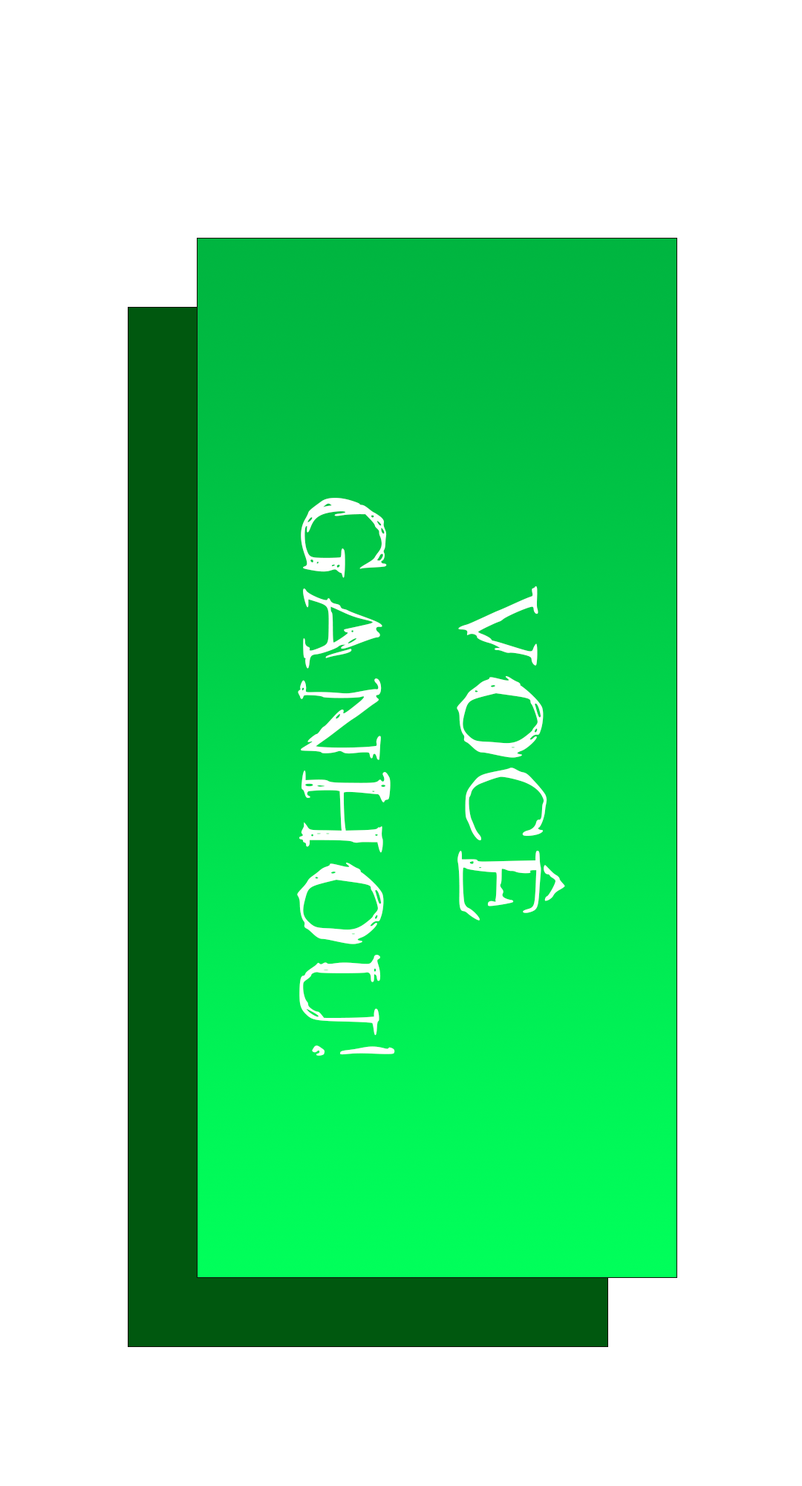
<style>
.page{position:relative;width:802px;height:1486px;background:#ffffff}
.page>*{position:absolute;margin:0}
.t1{font:177.1px/160.1px "Roman-New-Times";color:#ffffff;text-transform:uppercase}
</style>
<div class="page">
<p class="t1" style="left:297px;top:498px;width:268px;height:558px;text-align:center;rotate:90deg">VocÊ<br> ganhou!</p>
</div>
